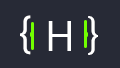
<style>
.page{position:relative;width:120px;height:68px;background:#272a36}
.page>*{position:absolute;margin:0}
.t1{font:44.9px "MicrosoftTaiLe";color:#ffffff}
.t2{font:42px "MicrosoftTaiLe";color:#ffffff}
</style>
<div class="page">
<p class="t1" style="left:20px;top:15px;width:11px;height:40px">{</p>
<p class="t1" style="left:88px;top:16px;width:10px;height:39px;rotate:180deg">{</p>
<p class="t2" style="left:48px;top:21px;width:23px;height:30px">H</p>
</div>
